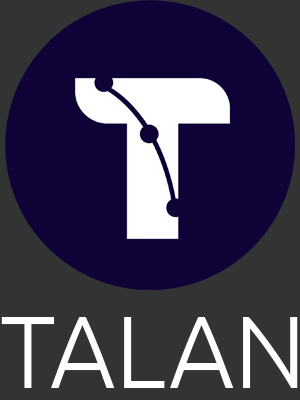
<style>
.page{position:relative;width:300px;height:400px;background:#0e0236}
.page>*{position:absolute;margin:0}
.t1{font:101.7px "Ubuntu-Light";color:#ffffff;text-transform:uppercase}
</style>
<div class="page">
<p class="t1" style="left:1px;top:317px;width:297px;height:71px">Talan</p>
</div>
